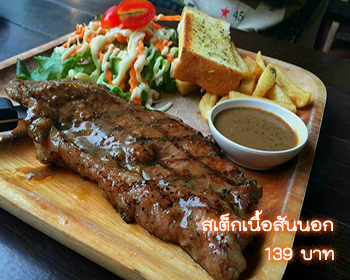
<style>
.page{position:relative;width:350px;height:280px}
.page>*{position:absolute;margin:0}
.t1{font:24px "THKodchasal";color:#ffffff}
</style>
<div class="page">
<p class="t1" style="left:201px;top:210px;width:133px;height:51px;text-align:right">สเต็กเนื้อสันนอก<br>บาท 139</p>
</div>
